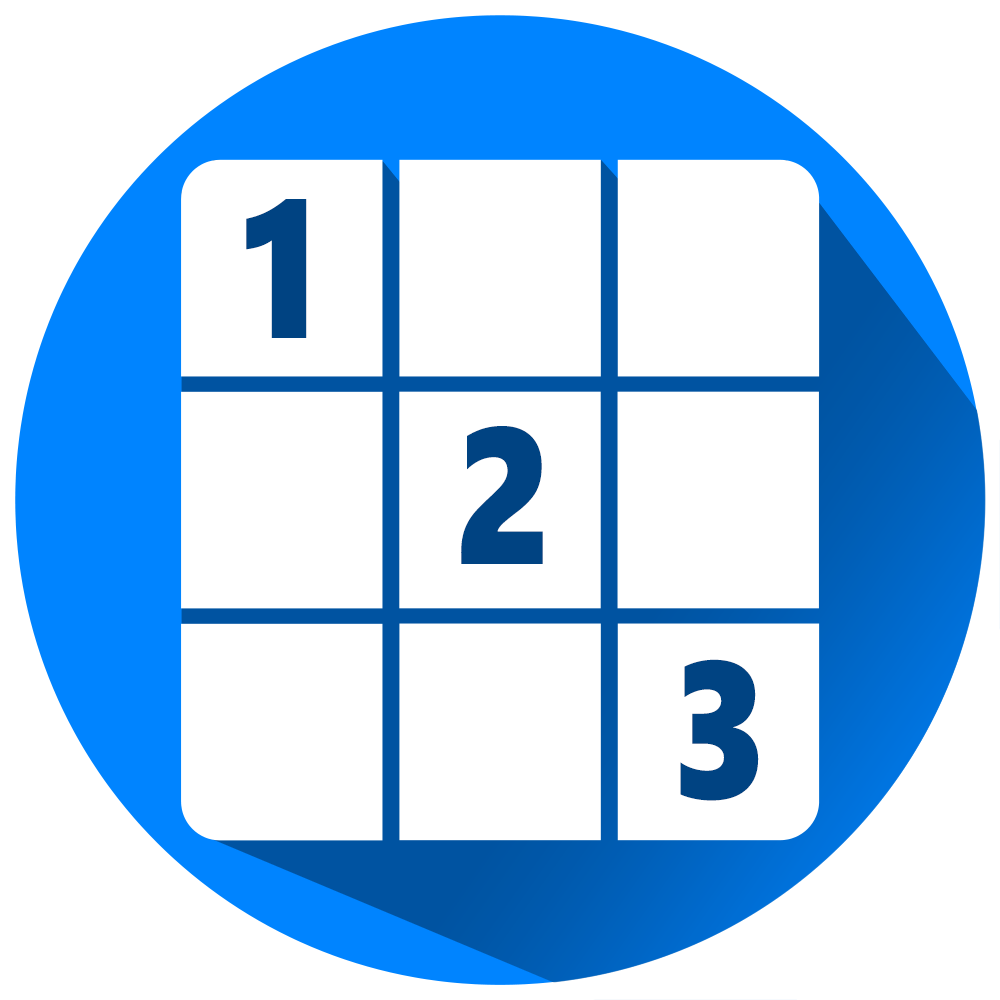
<style>
.page{position:relative;width:1000px;height:1000px;background:#ffffff}
.page>*{position:absolute;margin:0}
.t1{font:194.1px "SegoeUIBlack";letter-spacing:-0.005em;color:#004382;text-transform:uppercase;scale:0.85 1}
</style>
<div class="page">
<p class="t1" style="left:246px;top:199px;width:61px;height:139px">1</p>
<p class="t1" style="left:461px;top:426px;width:82px;height:138px">2</p>
<p class="t1" style="left:680px;top:659px;width:79px;height:142px">3</p>
</div>
